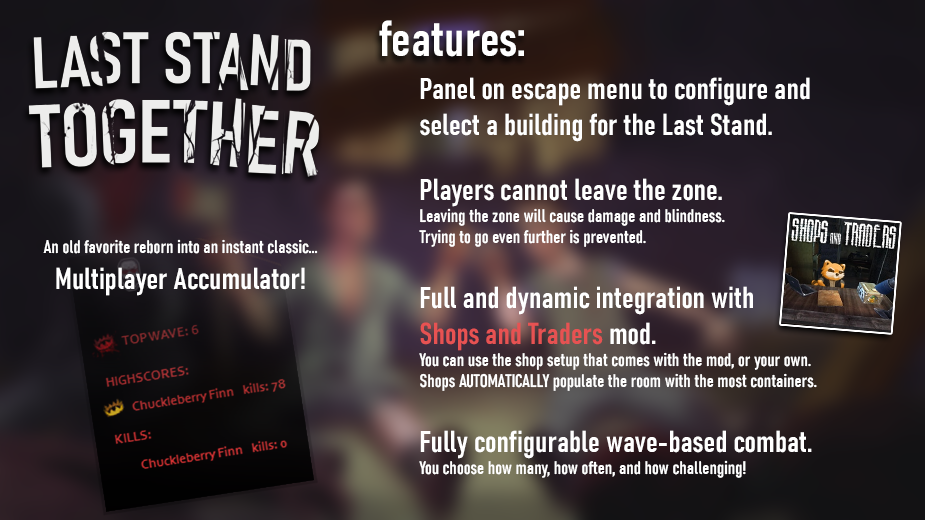
<style>
.page{position:relative;width:925px;height:520px}
.page>*{position:absolute;margin:0}
.t1{font:50px "Bahnschrift-SemiBoldCondensed";color:#ffffff;font-weight:bold}
.t2{font:18px "Bahnschrift-SemiBoldCondensed";color:#ffffff;font-weight:bold}
.t3{font:30px "Bahnschrift-SemiBoldCondensed";color:#ffffff;font-weight:bold}
.t4{font:24px "Bahnschrift-SemiBoldCondensed";color:#ffffff;font-weight:bold}
.t5{font:30px "Bahnschrift-SemiBoldCondensed";color:#e75252;font-weight:bold}
</style>
<div class="page">
<p class="t1" style="left:379px;top:20px;width:145px;height:37px">features:</p>
<p class="t2" style="left:419px;top:77px;width:398px;height:401px"><span class="t3">Panel on escape menu to configure and select a building for the Last Stand.<br></span><span class="t4"> <br></span><span class="t3">Players cannot leave the zone.<br></span>Leaving the zone will cause damage and blindness.<br>Trying to go even further is prevented.<br><span class="t4"><br></span><span class="t3">Full and dynamic integration with </span><span class="t5">Shops and Traders</span><span class="t3"> mod.<br></span>You can use the shop setup that comes with the mod, or your own.<br>Shops AUTOMATICALLY populate the room with the most containers.<br><span class="t4"> <br></span><span class="t3">Fully configurable wave-based combat.<br></span>You choose how many, how often, and how challenging!</p>
<p class="t2" style="left:43px;top:239px;width:275px;height:57px;text-align:center">An old favorite reborn into an instant classic...<br><span class="t3">Multiplayer Accumulator!</span></p>
</div>
